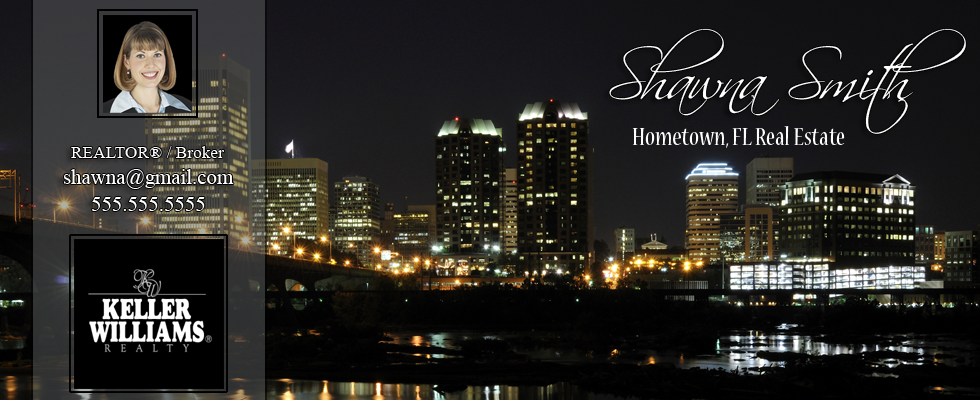
<style>
.page{position:relative;width:980px;height:400px}
.page>*{position:absolute;margin:0}
.t1{font:62.5px "Scriptina";color:#ffffff}
.t2{font:27.8px "NuevaStd-Cond";color:#ffffff}
.t3{font:17.4px "TimesNewRomanPSMT";color:#ffffff}
.t4{font:20.8px "TimesNewRomanPSMT";color:#ffffff}
</style>
<div class="page">
<p class="t1" style="left:609px;top:28px;width:357px;height:106px">Shawna Smith</p>
<p class="t2" style="left:632px;top:126px;width:213px;height:22px">Hometown, FL Real Estate</p>
<p class="t3" style="left:71px;top:146px;width:153px;height:12px">REALTOR® / Broker</p>
<p class="t4" style="left:64px;top:169px;width:170px;height:20px">shawna@gmail.com</p>
<p class="t4" style="left:92px;top:197px;width:113px;height:14px">555.555.5555</p>
</div>
